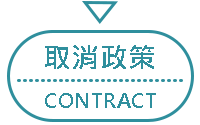
<style>
.page{position:relative;width:200px;height:125px;background:#ffffff}
.page>*{position:absolute;margin:0}
.t1{font:27.8px "MicrosoftJhengHeiBold";letter-spacing:0.025em;color:#2f8f9d}
.t2{font:20px "MicrosoftJhengHeiBold";letter-spacing:0.025em;color:#2f8f9d}
</style>
<div class="page">
<p class="t1" style="left:45px;top:45px;width:109px;height:24px">取消政策</p>
<p class="t2" style="left:45px;top:93px;width:111px;height:15px">CONTRACT</p>
</div>
